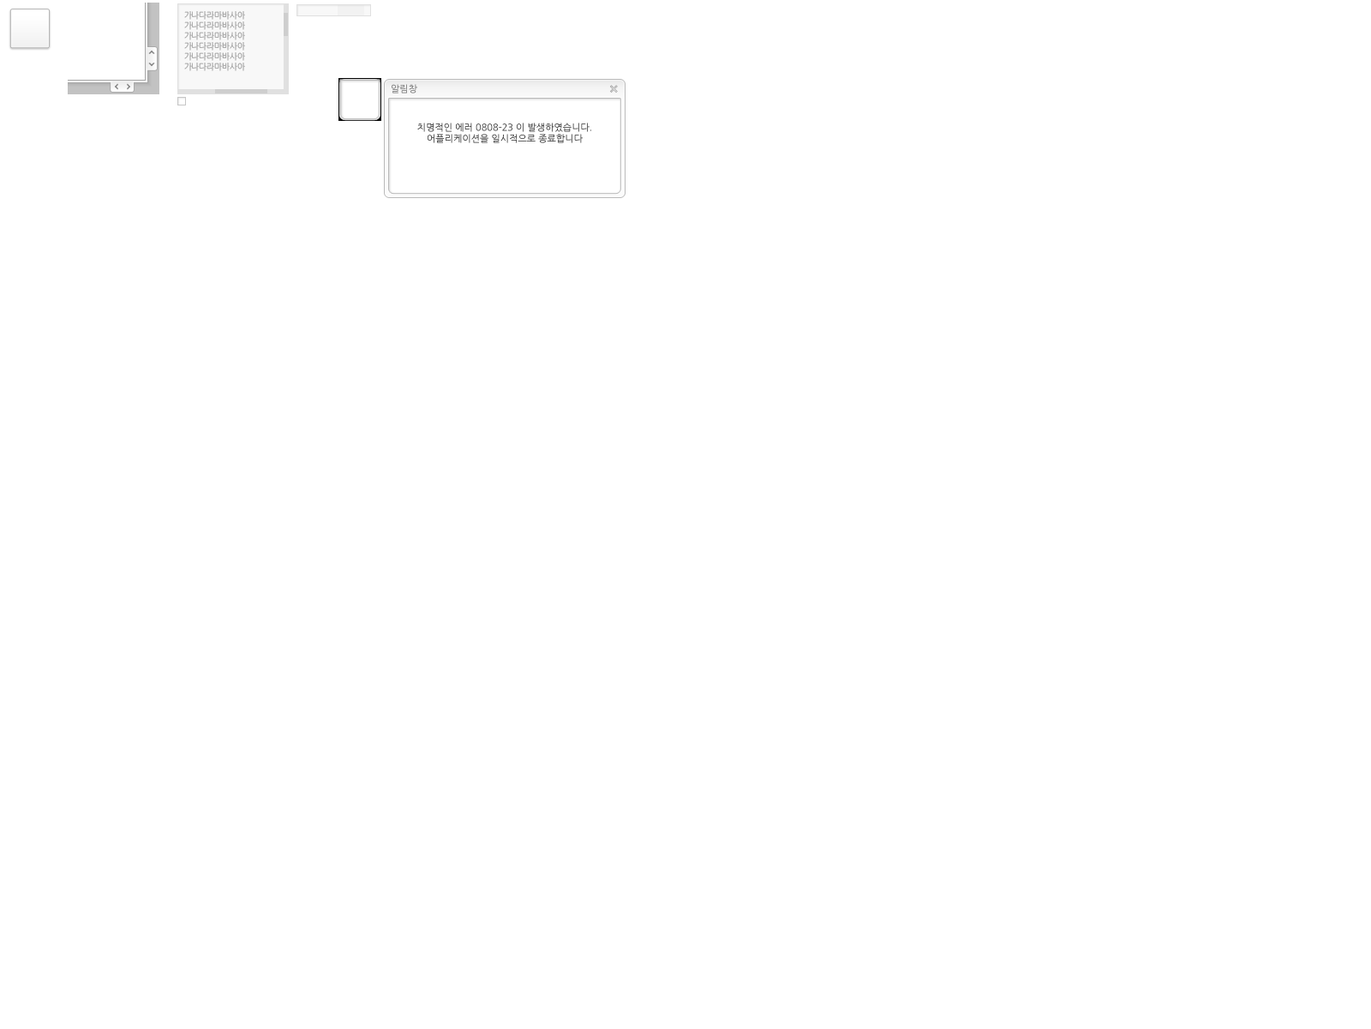
<style>
.page{position:relative;width:1371px;height:1029px;background:#ffffff}
.page>*{position:absolute;margin:0}
.t1{font:8.6px "NanumGothicOTF";color:#adadad;text-transform:uppercase;scale:0.95 1}
.t2{font:9.4px "NanumGothic"}
</style>
<div class="page">
<p class="t1" style="left:184px;top:11px;width:61px;height:60px">가나다라마바사아<br>가나다라마바사아<br>가나다라마바사아<br>가나다라마바사아<br>가나다라마바사아<br>가나다라마바사아</p>
<p class="t1" style="left:184px;top:11px;width:61px;height:60px">가나다라마바사아<br>가나다라마바사아<br>가나다라마바사아<br>가나다라마바사아<br>가나다라마바사아<br>가나다라마바사아</p>
<p class="t2" style="left:392px;top:84px;width:25px;height:9px">알림창</p>
<p class="t2" style="left:417px;top:123px;width:174px;height:20px;text-align:center">치명적인 에러 0808-23 이 발생하였습니다.<br>어플리케이션을 일시적으로 종료합니다</p>
</div>
